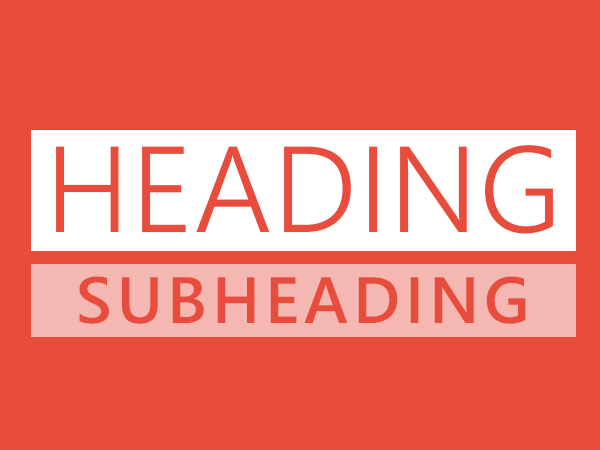
<style>
.page{position:relative;width:600px;height:450px;background:#e74c3c}
.page>*{position:absolute;margin:0}
.t1{font:122.2px "SegoeUI-Semilight";letter-spacing:0.008em;color:#e74c3c;text-transform:uppercase}
.t2{font:65.3px "SegoeUI-Semibold";letter-spacing:0.075em;color:#e74c3c;text-transform:uppercase}
</style>
<div class="page">
<p class="t1" style="left:56px;top:145px;width:497px;height:89px">Heading</p>
<p class="t2" style="left:79px;top:276px;width:447px;height:48px">Subheading</p>
</div>
